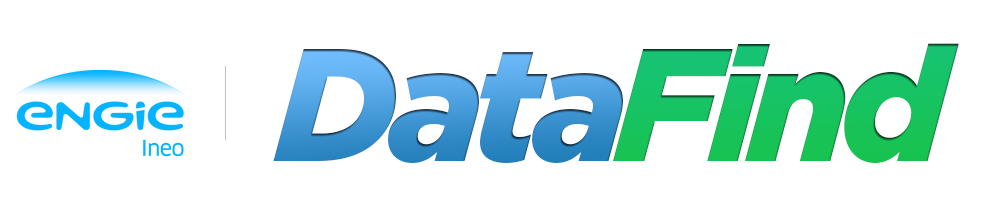
<style>
.page{position:relative;width:1000px;height:200px;background:#ffffff}
.page>*{position:absolute;margin:0}
.t1{font:160.2px "Gotham-BlackItalic";letter-spacing:-0.06em}
.t2{font:160.2px "Gotham-BlackItalic";letter-spacing:-0.06em;color:#17c360}
</style>
<div class="page">
<p class="t1" style="left:273px;top:49px;width:350px;height:114px">Data</p>
<p class="t2" style="left:613px;top:43px;width:346px;height:121px">Find</p>
</div>
